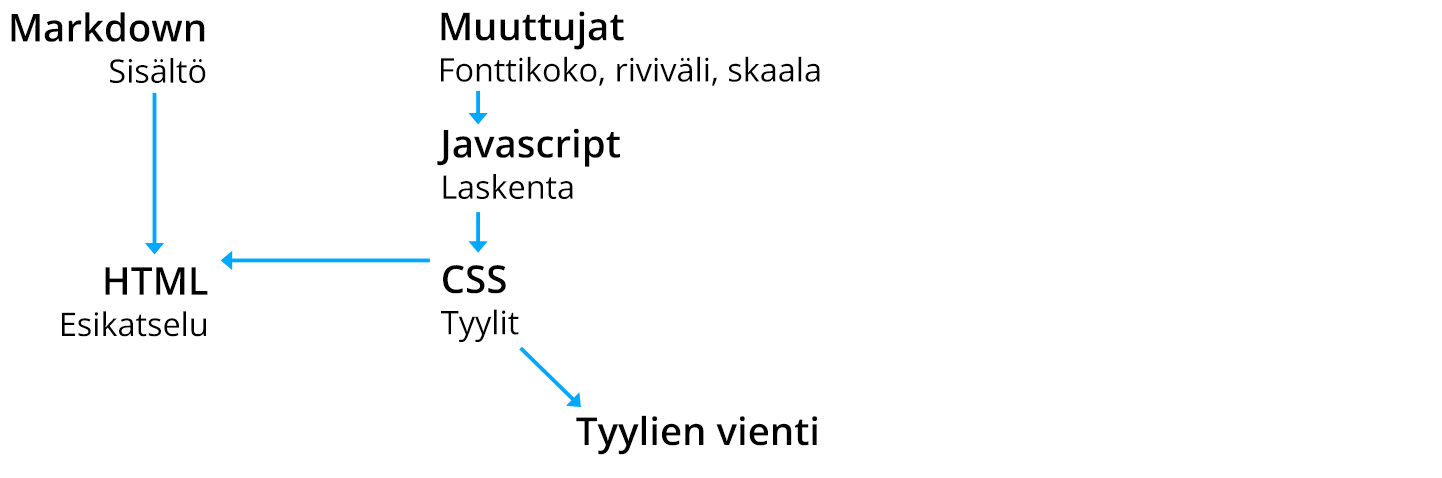
<style>
.page{position:relative;width:1442px;height:478px;background:#ffffff}
.page>*{position:absolute;margin:0}
.t1{font:38.4px/51.2px "OpenSans-Semibold";color:#000000}
.t2{font:32.4px/41.2px "OpenSans";color:#000000}
.t3{font:38.4px "OpenSans-Semibold";color:#000000}
</style>
<div class="page">
<p class="t1" style="left:11px;top:12px;width:195px;height:71px;text-align:right">Markdown<br><span class="t2">Sisältö</span></p>
<p class="t2" style="left:441px;top:11px;width:379px;height:75px"><span class="t1">Muuttujat<br></span>Fonttikoko, riviväli, skaala</p>
<p class="t1" style="left:437px;top:128px;width:183px;height:71px">Javascript<br><span class="t2">Laskenta</span></p>
<p class="t2" style="left:62px;top:267px;width:146px;height:70px;text-align:right"><span class="t1">HTML<br></span>Esikatselu</p>
<p class="t2" style="left:441px;top:265px;width:78px;height:77px"><span class="t1">CSS<br></span>Tyylit</p>
<p class="t3" style="left:576px;top:415px;width:241px;height:40px">Tyylien vienti</p>
</div>
